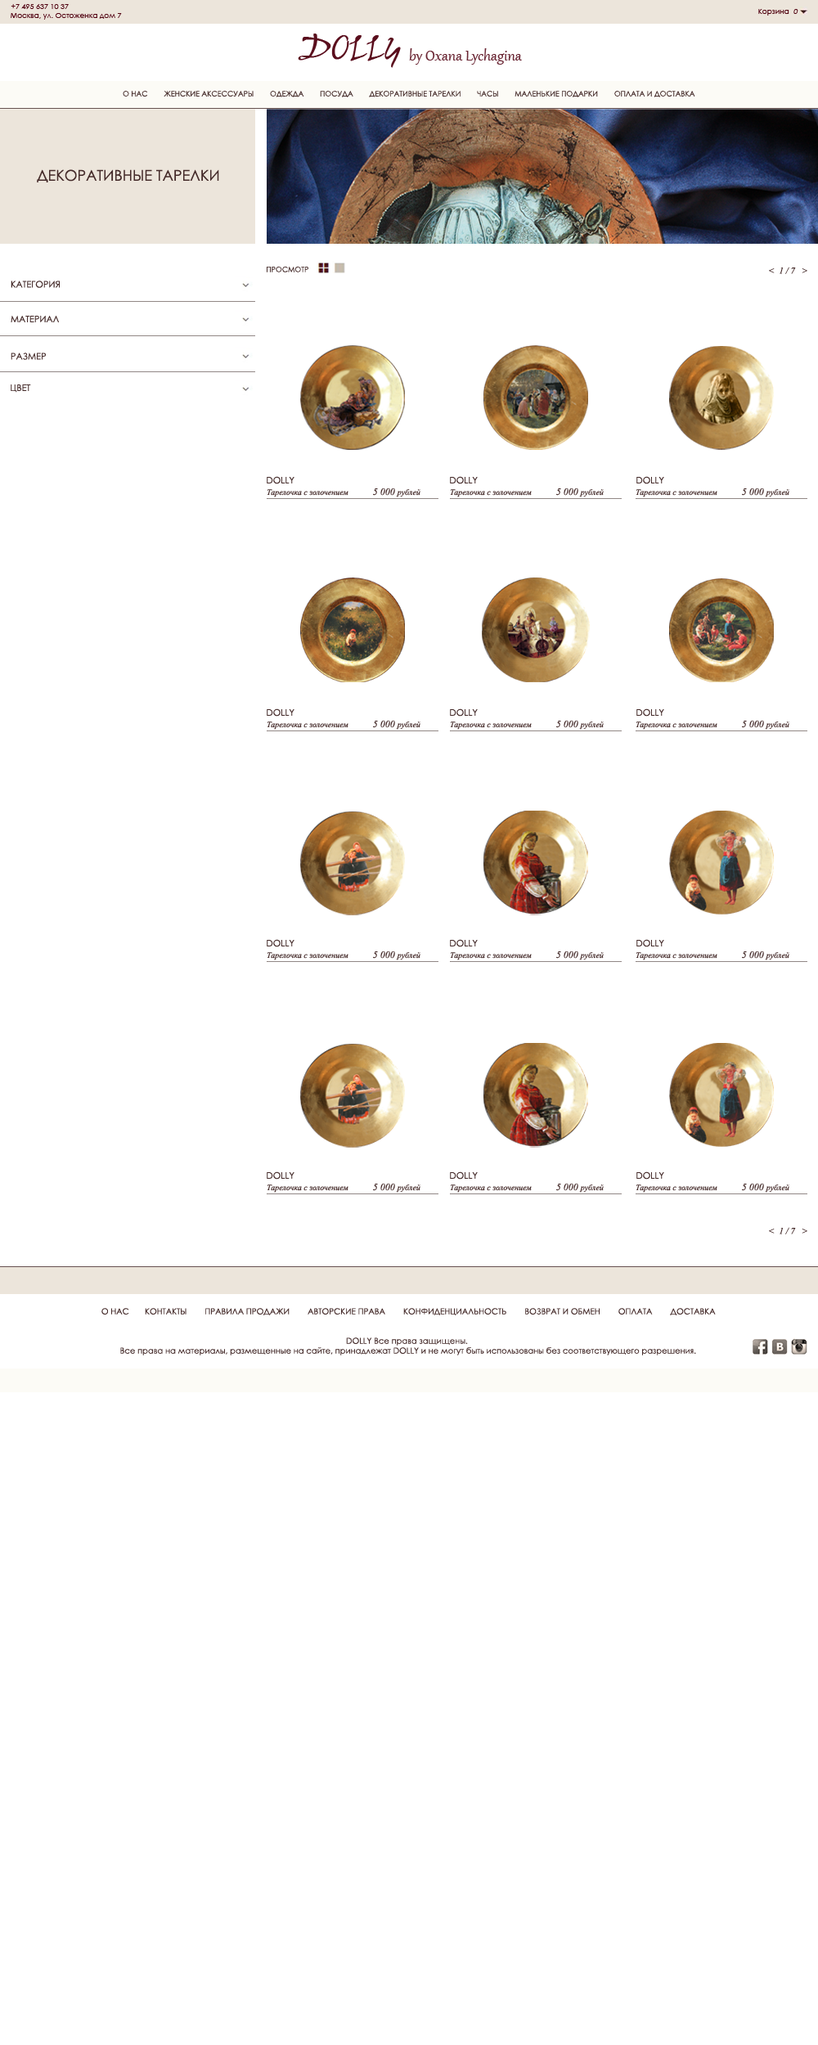
<style>
.page{position:relative;width:818px;height:2045px;background:#ffffff}
.page>*{position:absolute;margin:0}
.t1{font:7.4px "CenturyGothic";color:#510111}
.t2{font:7.4px "CenturyGothic";color:#510111;font-style:italic}
.t3{font:27px "Dali";color:#510111;font-weight:bold}
.t4{font:18px "Gabriola";color:#6b2734}
.t5{font:7.4px "CenturyGothic";color:#442a29}
.t6{font:14.7px "CenturyGothic";color:#442a29}
.t7{font:9px "TimesNewRomanPS-ItalicMT";color:#442a29}
.t8{font:9px "CenturyGothic";color:#442a29}
.t9{font:8.2px "TimesNewRomanPS-ItalicMT";color:#442a29}
.t10{font:9.8px "TimesNewRomanPS-ItalicMT";color:#442a29}
.t11{font:8.2px "CenturyGothic";color:#442a29}
</style>
<div class="page">
<p class="t1" style="left:11px;top:4px;width:58px;height:5px">+7 495 637 10 37</p>
<p class="t1" style="left:11px;top:13px;width:111px;height:7px">Москва, ул. Остоженка дом 7</p>
<p class="t1" style="left:758px;top:9px;width:41px;height:7px">Корзина  <span class="t2">0</span></p>
<p class="t3" style="left:298px;top:34px;width:103px;height:34px">DOLLY</p>
<p class="t4" style="left:409px;top:48px;width:113px;height:17px">by Oxana Lychagina</p>
<p class="t5" style="left:123px;top:91px;width:572px;height:6px">О НАС        ЖЕНСКИЕ АКСЕССУАРЫ        ОДЕЖДА        ПОСУДА        ДЕКОРАТИВНЫЕ ТАРЕЛКИ        ЧАСЫ        МАЛЕНЬКИЕ ПОДАРКИ        ОПЛАТА И ДОСТАВКА</p>
<p class="t6" style="left:37px;top:169px;width:182px;height:13px">ДЕКОРАТИВНЫЕ ТАРЕЛКИ</p>
<p class="t5" style="left:267px;top:266px;width:41px;height:6px">ПРОСМОТР</p>
<p class="t7" style="left:769px;top:267px;width:39px;height:7px">&lt;  1 / 7   &gt;</p>
<p class="t8" style="left:11px;top:281px;width:49px;height:7px">КАТЕГОРИЯ</p>
<p class="t8" style="left:11px;top:316px;width:48px;height:6px">МАТЕРИАЛ</p>
<p class="t8" style="left:11px;top:353px;width:35px;height:7px">РАЗМЕР</p>
<p class="t8" style="left:11px;top:385px;width:20px;height:8px">ЦВЕТ</p>
<p class="t8" style="left:267px;top:476px;width:28px;height:8px">DOLLY</p>
<p class="t8" style="left:450px;top:476px;width:28px;height:8px">DOLLY</p>
<p class="t8" style="left:637px;top:476px;width:27px;height:8px">DOLLY</p>
<p class="t9" style="left:267px;top:488px;width:154px;height:9px">Тарелочка с золочением            <span class="t10">5 000 </span>рублей</p>
<p class="t9" style="left:450px;top:488px;width:154px;height:9px">Тарелочка с золочением            <span class="t10">5 000 </span>рублей</p>
<p class="t9" style="left:636px;top:488px;width:154px;height:9px">Тарелочка с золочением            <span class="t10">5 000 </span>рублей</p>
<p class="t8" style="left:267px;top:709px;width:28px;height:8px">DOLLY</p>
<p class="t8" style="left:450px;top:709px;width:28px;height:8px">DOLLY</p>
<p class="t8" style="left:637px;top:709px;width:27px;height:8px">DOLLY</p>
<p class="t9" style="left:267px;top:720px;width:154px;height:10px">Тарелочка с золочением            <span class="t10">5 000 </span>рублей</p>
<p class="t9" style="left:450px;top:720px;width:154px;height:10px">Тарелочка с золочением            <span class="t10">5 000 </span>рублей</p>
<p class="t9" style="left:636px;top:720px;width:154px;height:10px">Тарелочка с золочением            <span class="t10">5 000 </span>рублей</p>
<p class="t8" style="left:267px;top:939px;width:28px;height:8px">DOLLY</p>
<p class="t8" style="left:450px;top:939px;width:28px;height:8px">DOLLY</p>
<p class="t8" style="left:637px;top:939px;width:27px;height:8px">DOLLY</p>
<p class="t9" style="left:267px;top:951px;width:154px;height:10px">Тарелочка с золочением            <span class="t10">5 000 </span>рублей</p>
<p class="t9" style="left:450px;top:951px;width:154px;height:10px">Тарелочка с золочением            <span class="t10">5 000 </span>рублей</p>
<p class="t9" style="left:636px;top:951px;width:154px;height:10px">Тарелочка с золочением            <span class="t10">5 000 </span>рублей</p>
<p class="t8" style="left:267px;top:1172px;width:28px;height:8px">DOLLY</p>
<p class="t8" style="left:450px;top:1172px;width:28px;height:8px">DOLLY</p>
<p class="t8" style="left:637px;top:1172px;width:27px;height:8px">DOLLY</p>
<p class="t9" style="left:267px;top:1183px;width:154px;height:10px">Тарелочка с золочением            <span class="t10">5 000 </span>рублей</p>
<p class="t9" style="left:450px;top:1183px;width:154px;height:10px">Тарелочка с золочением            <span class="t10">5 000 </span>рублей</p>
<p class="t9" style="left:636px;top:1183px;width:154px;height:10px">Тарелочка с золочением            <span class="t10">5 000 </span>рублей</p>
<p class="t7" style="left:769px;top:1227px;width:39px;height:8px">&lt;  1 / 7   &gt;</p>
<p class="t11" style="left:101px;top:1308px;width:615px;height:8px">О НАС       КОНТАКТЫ        ПРАВИЛА ПРОДАЖИ        АВТОРСКИЕ ПРАВА        КОНФИДЕНЦИАЛЬНОСТЬ        ВОЗВРАТ И ОБМЕН        ОПЛАТА        ДОСТАВКА</p>
<p class="t11" style="left:120px;top:1338px;width:576px;height:18px;text-align:center">DOLLY Все права защищены. <br>Все права на материалы, размещенные на сайте, принадлежат DOLLY и не могут быть использованы без соответствующего разрешения.</p>
</div>
